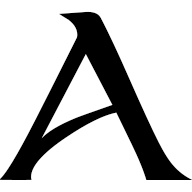
<style>
.page{position:relative;width:192px;height:192px;background:#ffffff}
.page>*{position:absolute;margin:0}
.t1{font:280px "Dumbledor1";letter-spacing:0.025em;color:#000000}
</style>
<div class="page">
<p class="t1" style="left:0px;top:11px;width:193px;height:169px">A</p>
</div>
